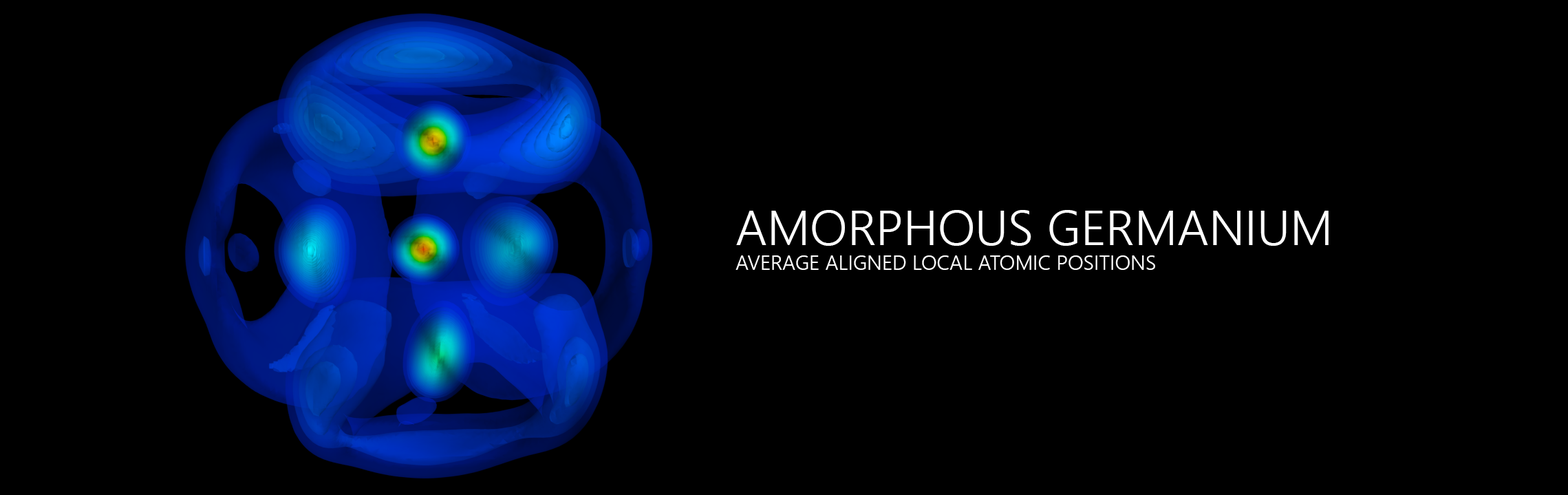
<style>
.page{position:relative;width:1568px;height:495px;background:#000000}
.page>*{position:absolute;margin:0}
.t1{font:20.6px "NirmalaUI-Semilight";color:#ffffff}
.t2{font:49.5px "NirmalaUI-Semilight";color:#ffffff}
</style>
<div class="page">
<p class="t1" style="left:735px;top:210px;width:594px;height:60px"><span class="t2">AMORPHOUS GERMANIUM<br></span>AVERAGE ALIGNED LOCAL ATOMIC POSITIONS</p>
</div>
